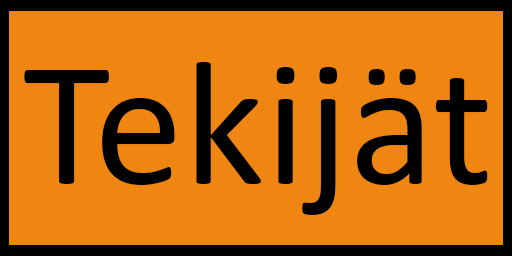
<style>
.page{position:relative;width:512px;height:256px;background:#ef8611}
.page>*{position:absolute;margin:0}
.t1{font:179px "Calibri";color:#000000}
</style>
<div class="page">
<p class="t1" style="left:24px;top:62px;width:464px;height:153px">Tekijät</p>
</div>
